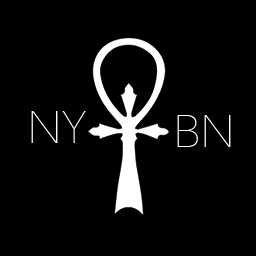
<style>
.page{position:relative;width:256px;height:256px;background:#000000}
.page>*{position:absolute;margin:0}
.t1{font:44.5px "AvenirNext-UltraLight";color:#ffffff}
</style>
<div class="page">
<p class="t1" style="left:31px;top:111px;width:55px;height:32px">NY</p>
<p class="t1" style="left:177px;top:115px;width:54px;height:32px">BN</p>
</div>
